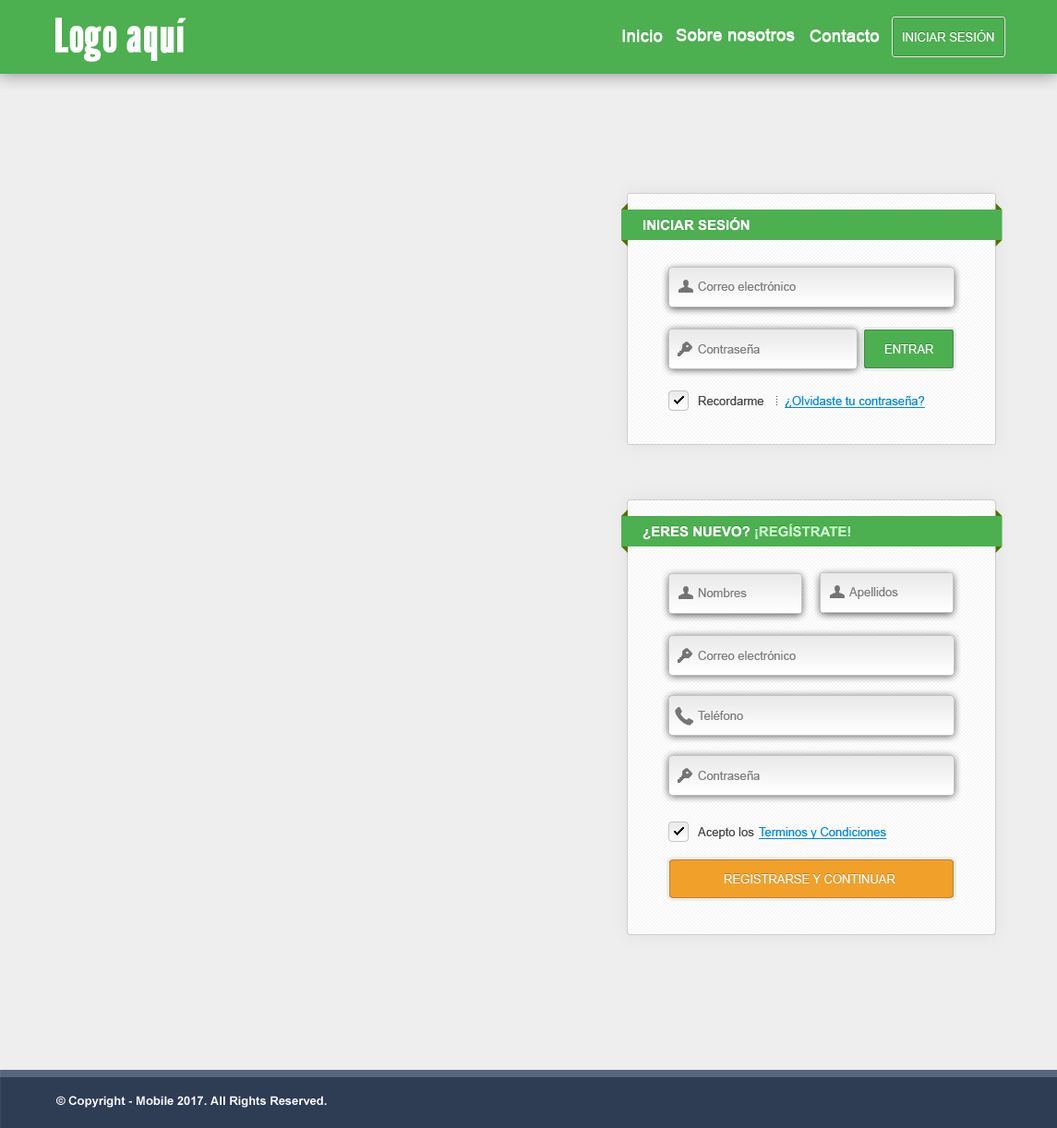
<style>
.page{position:relative;width:1057px;height:1128px;background:#eeeeee}
.page>*{position:absolute;margin:0}
.t1{font:46.2px "LeagueGothic-Regular";color:#ffffff;font-weight:bold}
.t2{font:16.6px "ArialMT";color:#ffffff;font-weight:bold}
.t3{font:12px "ArialMT";color:#ffffff;text-transform:uppercase}
.t4{font:13.8px "Arial-BoldMT";color:#ffffff;text-transform:uppercase}
.t5{font:12px "ArialMT";color:#7e7e7e}
.t6{font:12px "ArialMT";color:#464646}
.t7{font:12px "ArialMT";color:#0088de;text-decoration:underline}
.t8{font:13.8px "Arial-BoldMT";color:#c9ffcb;text-transform:uppercase}
.t9{font:12px "Arial-BoldMT";color:#ffffff}
</style>
<div class="page">
<p class="t1" style="left:55px;top:18px;width:131px;height:44px">Logo aquí</p>
<p class="t2" style="left:622px;top:30px;width:41px;height:12px">Inicio</p>
<p class="t2" style="left:676px;top:29px;width:119px;height:13px">Sobre nosotros</p>
<p class="t2" style="left:810px;top:30px;width:70px;height:12px">Contacto</p>
<p class="t3" style="left:903px;top:30px;width:91px;height:12px">Iniciar Sesión</p>
<p class="t4" style="left:643px;top:217px;width:107px;height:14px">Iniciar Sesión</p>
<p class="t5" style="left:698px;top:282px;width:98px;height:9px">Correo electrónico</p>
<p class="t5" style="left:698px;top:344px;width:62px;height:10px">Contraseña</p>
<p class="t3" style="left:884px;top:344px;width:50px;height:10px">Entrar</p>
<p class="t6" style="left:698px;top:396px;width:65px;height:9px">Recordarme</p>
<p class="t7" style="left:785px;top:396px;width:140px;height:12px">¿Olvidaste tu contraseña?</p>
<p class="t4" style="left:643px;top:523px;width:207px;height:17px">¿Eres nuevo? <span class="t8">¡Regístrate!</span></p>
<p class="t5" style="left:698px;top:588px;width:49px;height:9px">Nombres</p>
<p class="t5" style="left:849px;top:587px;width:49px;height:12px">Apellidos</p>
<p class="t5" style="left:698px;top:651px;width:98px;height:9px">Correo electrónico</p>
<p class="t5" style="left:698px;top:711px;width:45px;height:9px">Teléfono</p>
<p class="t5" style="left:698px;top:771px;width:62px;height:9px">Contraseña</p>
<p class="t6" style="left:698px;top:827px;width:56px;height:12px">Acepto los</p>
<p class="t7" style="left:759px;top:827px;width:128px;height:12px">Terminos y Condiciones</p>
<p class="t3" style="left:724px;top:874px;width:171px;height:9px">registrarse y Continuar</p>
<p class="t9" style="left:56px;top:1096px;width:271px;height:12px">© Copyright - Mobile 2017. All Rights Reserved.</p>
</div>
